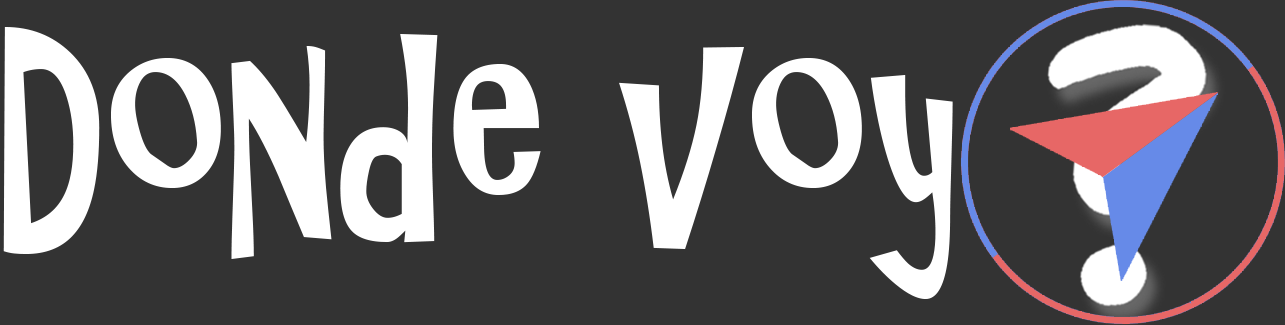
<style>
.page{position:relative;width:1285px;height:325px;background:#333333}
.page>*{position:absolute;margin:0}
.t1{font:282.7px "ARCHRISTY";color:#ffffff;scale:0.8 1}
</style>
<div class="page">
<p class="t1" style="left:3px;top:27px;width:950px;height:272px">Donde voy</p>
</div>
